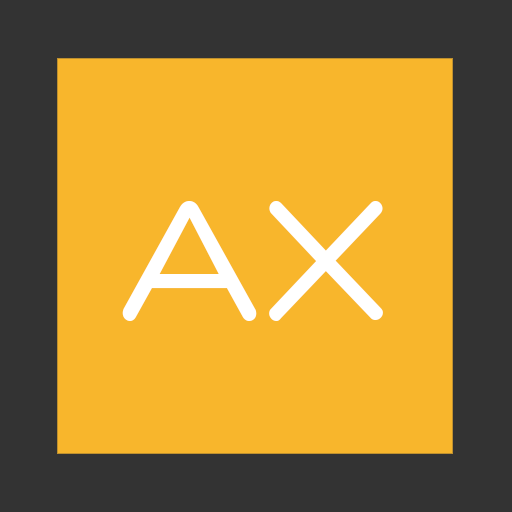
<style>
.page{position:relative;width:512px;height:512px;background:#f8b62c}
.page>*{position:absolute;margin:0}
.t1{font:169px "NeuropolXFree";color:#ffffff;scale:0.83 1}
</style>
<div class="page">
<p class="t1" style="left:122px;top:201px;width:261px;height:120px">AX</p>
</div>
